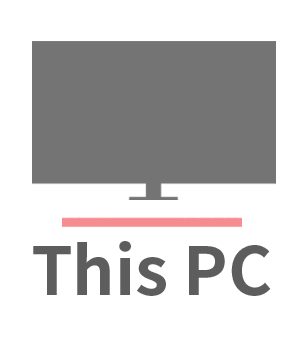
<style>
.page{position:relative;width:308px;height:351px;background:#ffffff}
.page>*{position:absolute;margin:0}
.t1{font:66.7px "NotoSansCJKkr-Bold";color:#5d5d5d}
</style>
<div class="page">
<p class="t1" style="left:33px;top:241px;width:238px;height:55px">This PC</p>
</div>
